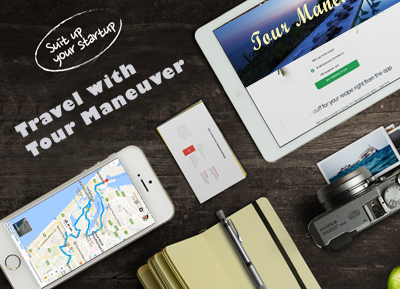
<style>
.page{position:relative;width:400px;height:289px}
.page>*{position:absolute;margin:0}
.t1{font:18px "GillSans-UltraBold";letter-spacing:0.06em;color:#d1d2d8}
</style>
<div class="page">
<p class="t1" style="left:14px;top:59px;width:170px;height:98px;rotate:-30deg">Travel with <br>Tour Maneuver</p>
</div>
